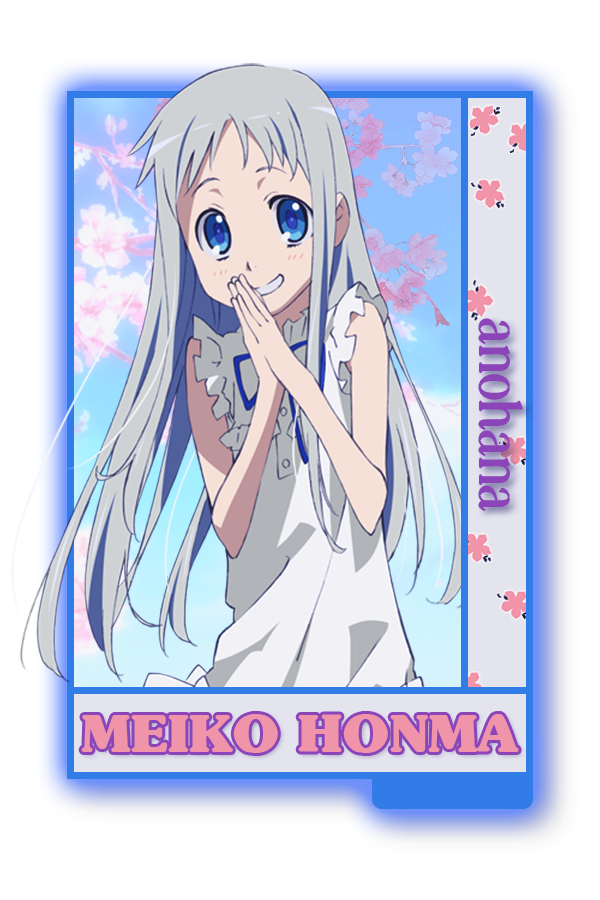
<style>
.page{position:relative;width:600px;height:900px;background:#ffffff}
.page>*{position:absolute;margin:0}
.t1{font:58.3px "CasanovaSerifDisplayFree-Regula";color:#8c44b9}
.t2{font:52.9px "Subway-Black";color:#e7a1a6}
</style>
<div class="page">
<p class="t1" style="left:479px;top:319px;width:43px;height:192px;rotate:90deg">anohana</p>
<p class="t2" style="left:81px;top:714px;width:438px;height:39px">MEIKO HONMA</p>
</div>
